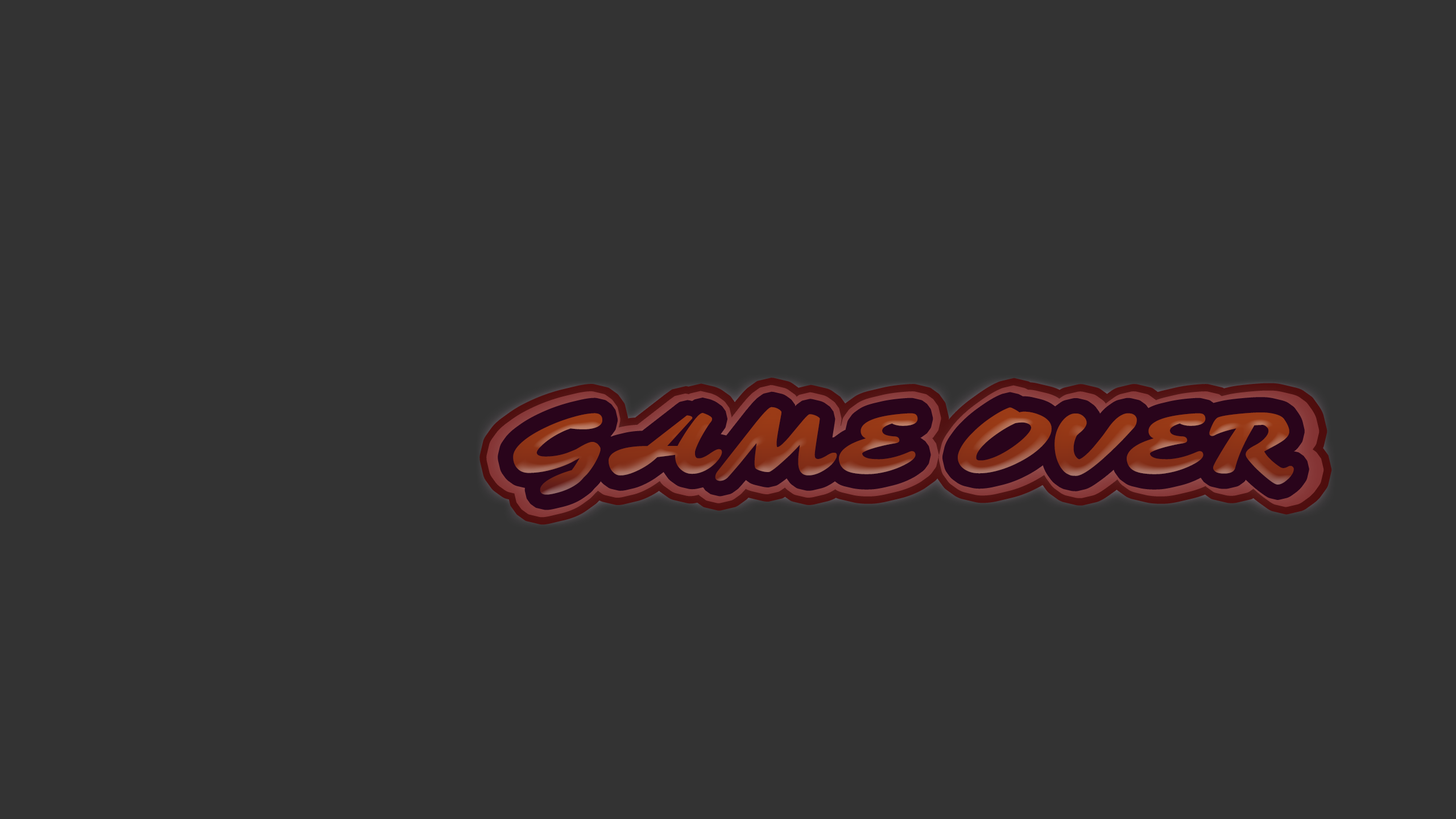
<style>
.page{position:relative;width:1456px;height:819px;background:#333333}
.page>*{position:absolute;margin:0}
.t1{font:90.4px "Sarina-Regular"}
.t2{font:88.8px "Sarina-Regular";color:#923817}
</style>
<div class="page">
<p class="t1" style="left:508px;top:407px;width:794px;height:89px">GAME OVER</p>
<p class="t1" style="left:508px;top:407px;width:795px;height:89px">GAME OVER</p>
<p class="t2" style="left:513px;top:407px;width:781px;height:88px">GAME OVER</p>
</div>
